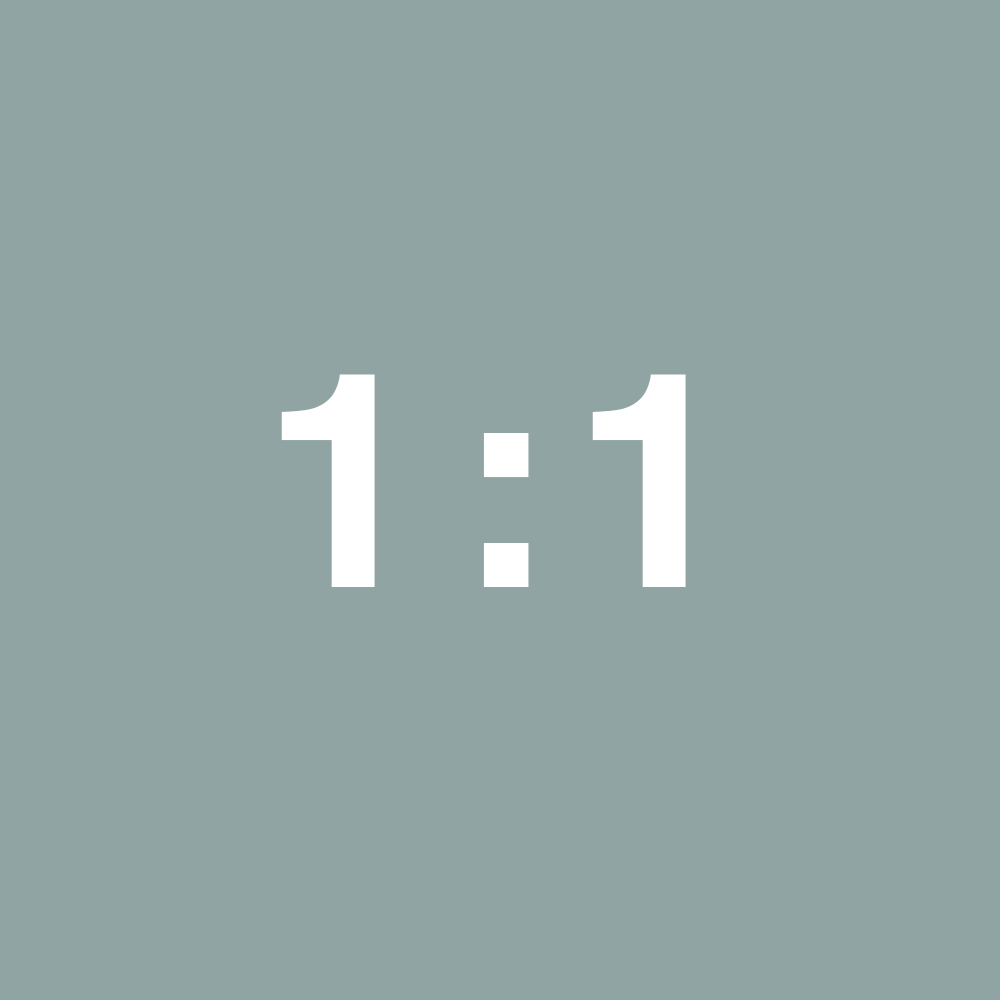
<style>
.page{position:relative;width:1000px;height:1000px;background:#90a4a3}
.page>*{position:absolute;margin:0}
.t1{font:300px "Helvetica-Bold";letter-spacing:0.075em;color:#ffffff}
</style>
<div class="page">
<p class="t1" style="left:281px;top:374px;width:405px;height:213px">1:1</p>
</div>
